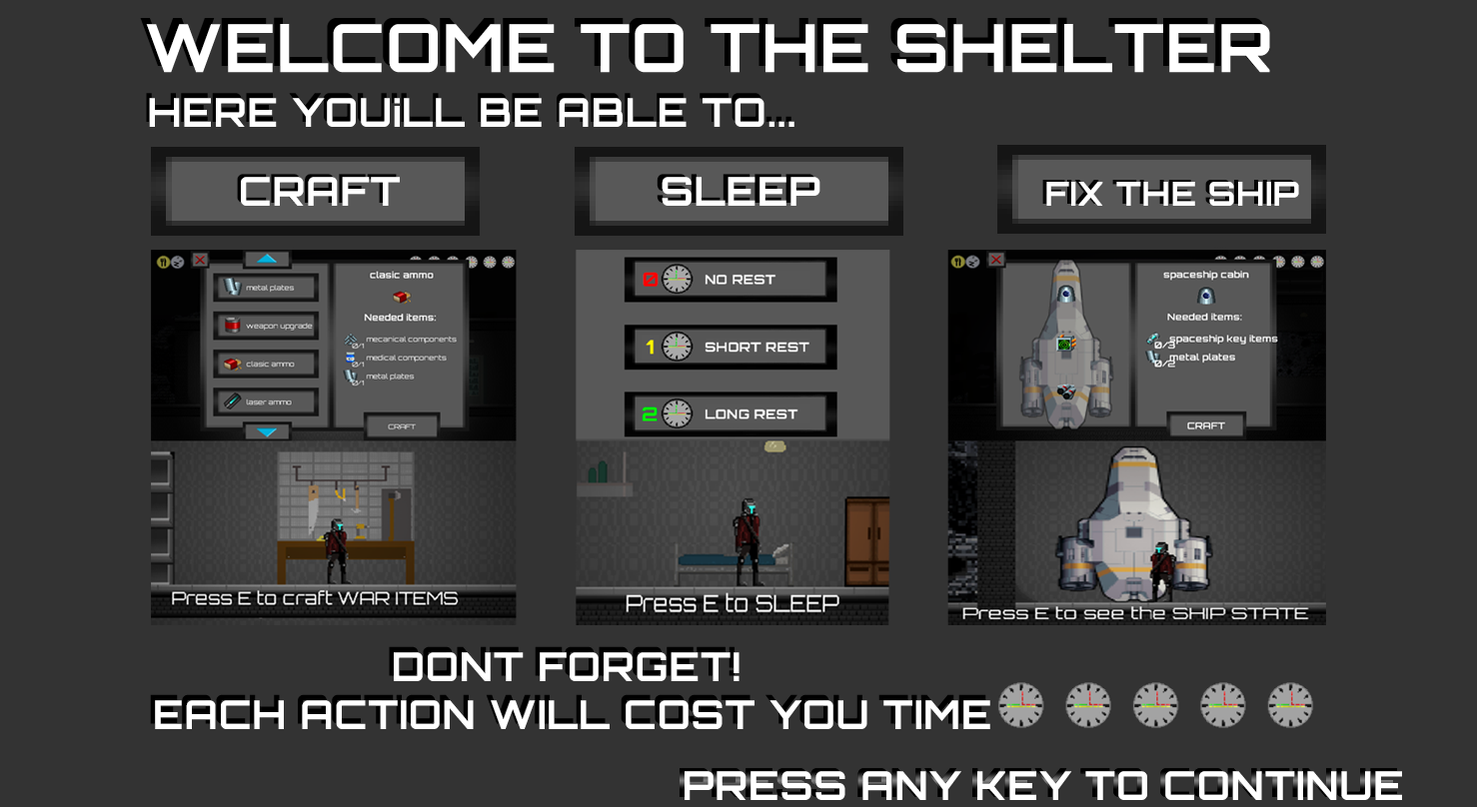
<style>
.page{position:relative;width:1477px;height:807px;background:#333333}
.page>*{position:absolute;margin:0}
.t1{font:66.6px "Orbitron-Bold";letter-spacing:0.02em;color:#ffffff}
.t2{font:40px "Orbitron-Bold";letter-spacing:0.02em;color:#ffffff}
.t3{font:33.3px "Orbitron-Bold";letter-spacing:0.02em;color:#ffffff}
</style>
<div class="page">
<p class="t1" style="left:146px;top:24px;width:1124px;height:49px">WELCOME TO THE SHELTER</p>
<p class="t2" style="left:149px;top:98px;width:645px;height:29px">HERE YOU¡LL BE ABLE TO...</p>
<p class="t2" style="left:241px;top:177px;width:159px;height:29px">CRAFT</p>
<p class="t2" style="left:662px;top:177px;width:158px;height:29px">SLEEP</p>
<p class="t3" style="left:1046px;top:182px;width:253px;height:24px">FIX THE SHIP</p>
<p class="t2" style="left:155px;top:653px;width:835px;height:76px;text-align:center">DONT FORGET! <br>EACH ACTION WILL COST YOU TIME</p>
<p class="t2" style="left:684px;top:771px;width:718px;height:29px">PRESS ANY KEY TO CONTINUE</p>
</div>
